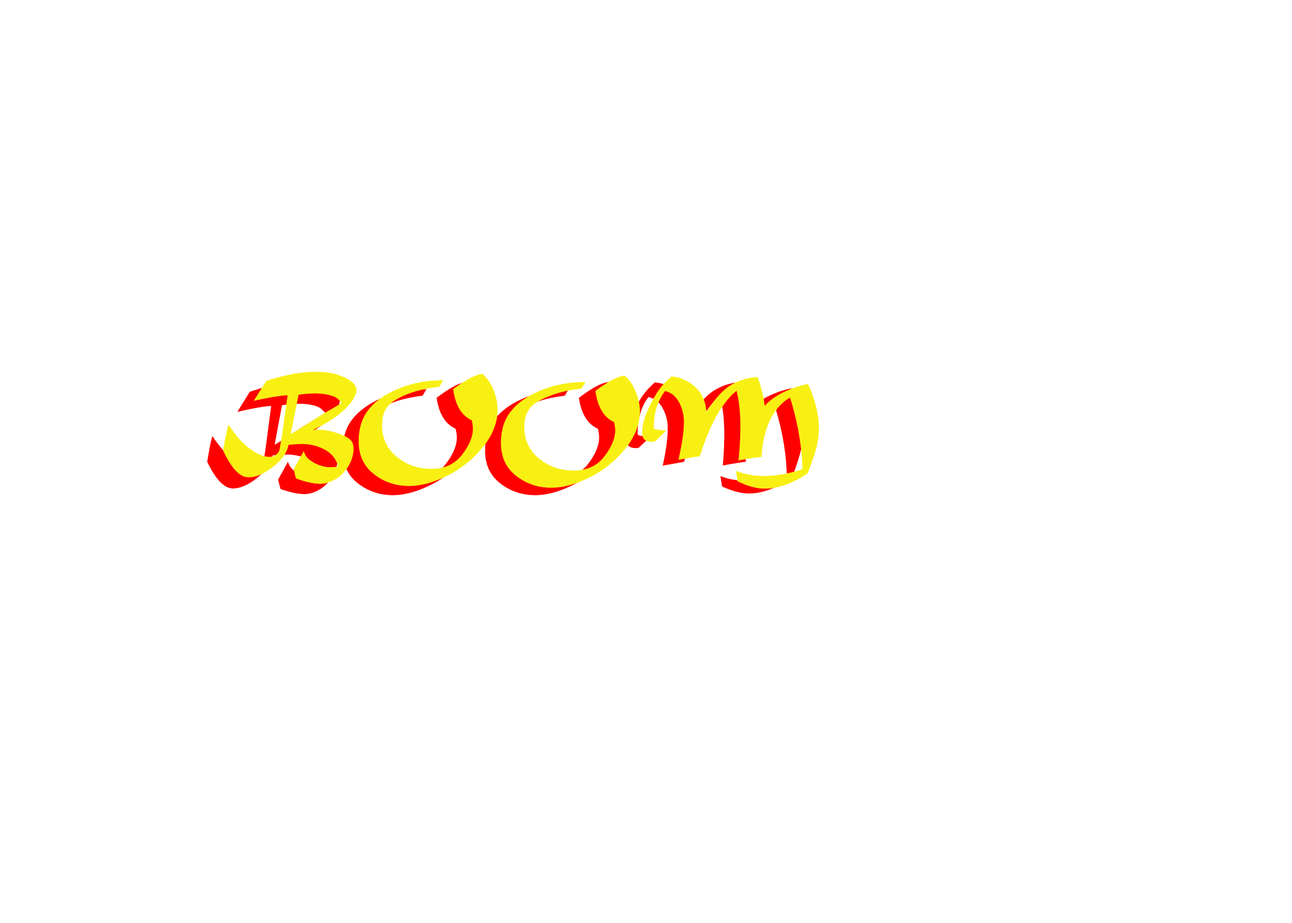
<style>
.page{position:relative;width:1292px;height:923px;background:#ffffff}
.page>*{position:absolute;margin:0}
.t1{font:123.1px "MaturaMTScriptCapitals";color:#f8f013}
.t2{font:123.1px "MaturaMTScriptCapitals"}
</style>
<div class="page">
<p class="t1" style="left:223px;top:372px;width:596px;height:117px;rotate:1deg">BOOM</p>
<p class="t2" style="left:207px;top:382px;width:596px;height:113px">BOOM</p>
</div>
